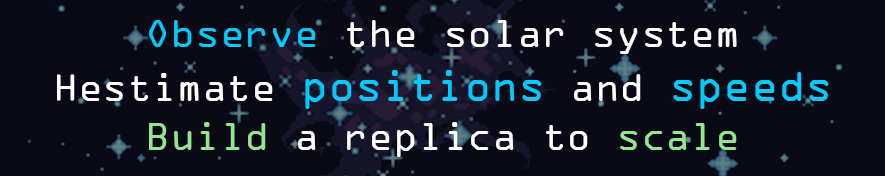
<style>
.page{position:relative;width:885px;height:176px;background:#090a15}
.page>*{position:absolute;margin:0}
.t1{font:41px "OCRAExtended";color:#ffffff}
.t2{font:41px "OCRAExtended";color:#00cbfd}
.t3{font:45px "OCRAExtended";color:#01cbfd}
.t4{font:41px "OCRAExtended";color:#94e590}
</style>
<div class="page">
<p class="t1" style="left:57px;top:20px;width:772px;height:137px;text-align:center"><span class="t2">Observe</span> the solar system<br>Hestimate <span class="t3">positions</span> and <span class="t3">speeds<br></span><span class="t4">Build</span> a replica to <span class="t4">scale</span></p>
</div>
